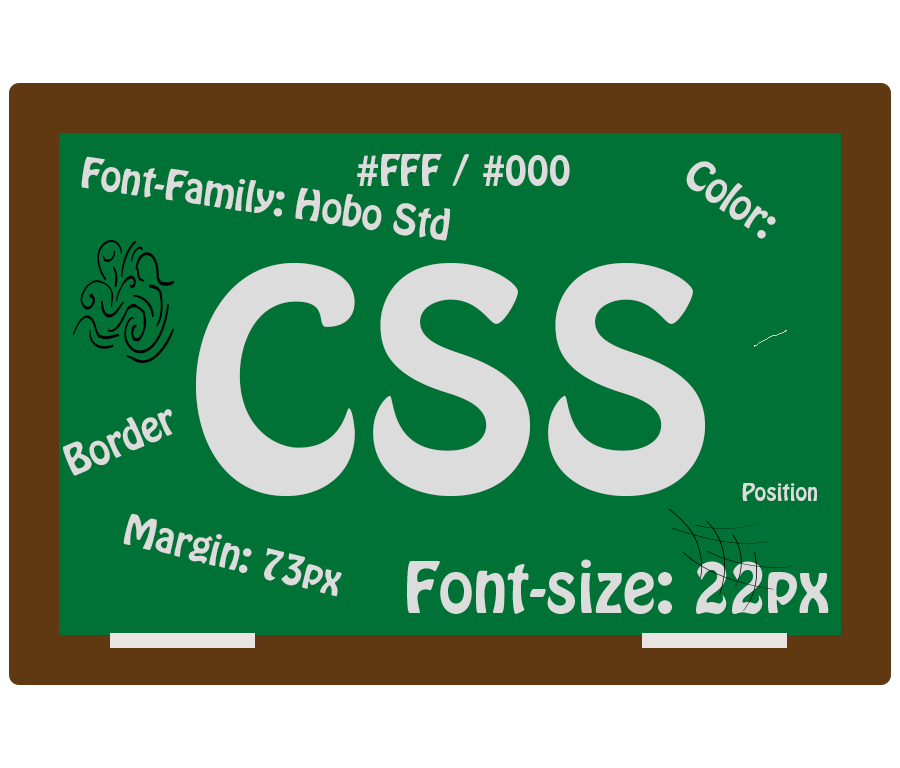
<style>
.page{position:relative;width:900px;height:768px;background:#007236}
.page>*{position:absolute;margin:0}
.t1{font:37.5px "HoboStd";color:#dcdcdc}
.t2{font:270.8px "HoboStd";color:#dcdcdc}
.t3{font:20.8px "HoboStd";color:#dcdcdc}
</style>
<div class="page">
<p class="t1" style="left:81px;top:156px;width:369px;height:85px;rotate:8deg">Font-Family: Hobo Std</p>
<p class="t1" style="left:357px;top:154px;width:213px;height:32px">#FFF / #000</p>
<p class="t1" style="left:686px;top:161px;width:90px;height:78px;rotate:36deg">Color:</p>
<p class="t2" style="left:196px;top:263px;width:509px;height:234px">CSS</p>
<p class="t1" style="left:63px;top:409px;width:110px;height:67px;rotate:-23deg">Border</p>
<p class="t3" style="left:742px;top:483px;width:75px;height:18px">Position</p>
<p class="t1" style="left:123px;top:513px;width:219px;height:84px;rotate:14deg">Margin: 73px</p>
</div>
